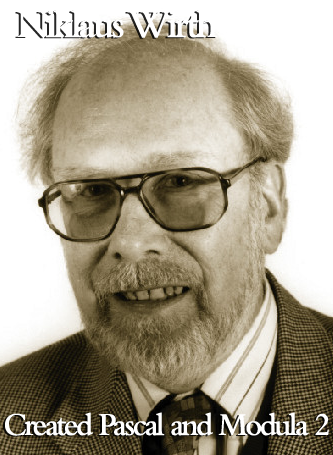
<style>
.page{position:relative;width:333px;height:455px;background:#ffffff}
.page>*{position:absolute;margin:0}
.t1{font:41.6px "BemboMT-SemiBold";letter-spacing:-0.08em;color:#ffffff;scale:0.95 1}
.t2{font:33.3px "BemboMT-SemiBold";letter-spacing:-0.08em;color:#ffffff;scale:0.95 1}
</style>
<div class="page">
<p class="t1" style="left:17px;top:9px;width:201px;height:29px">Niklaus Wirth</p>
<p class="t2" style="left:5px;top:412px;width:324px;height:24px">Created Pascal and Modula 2</p>
</div>
